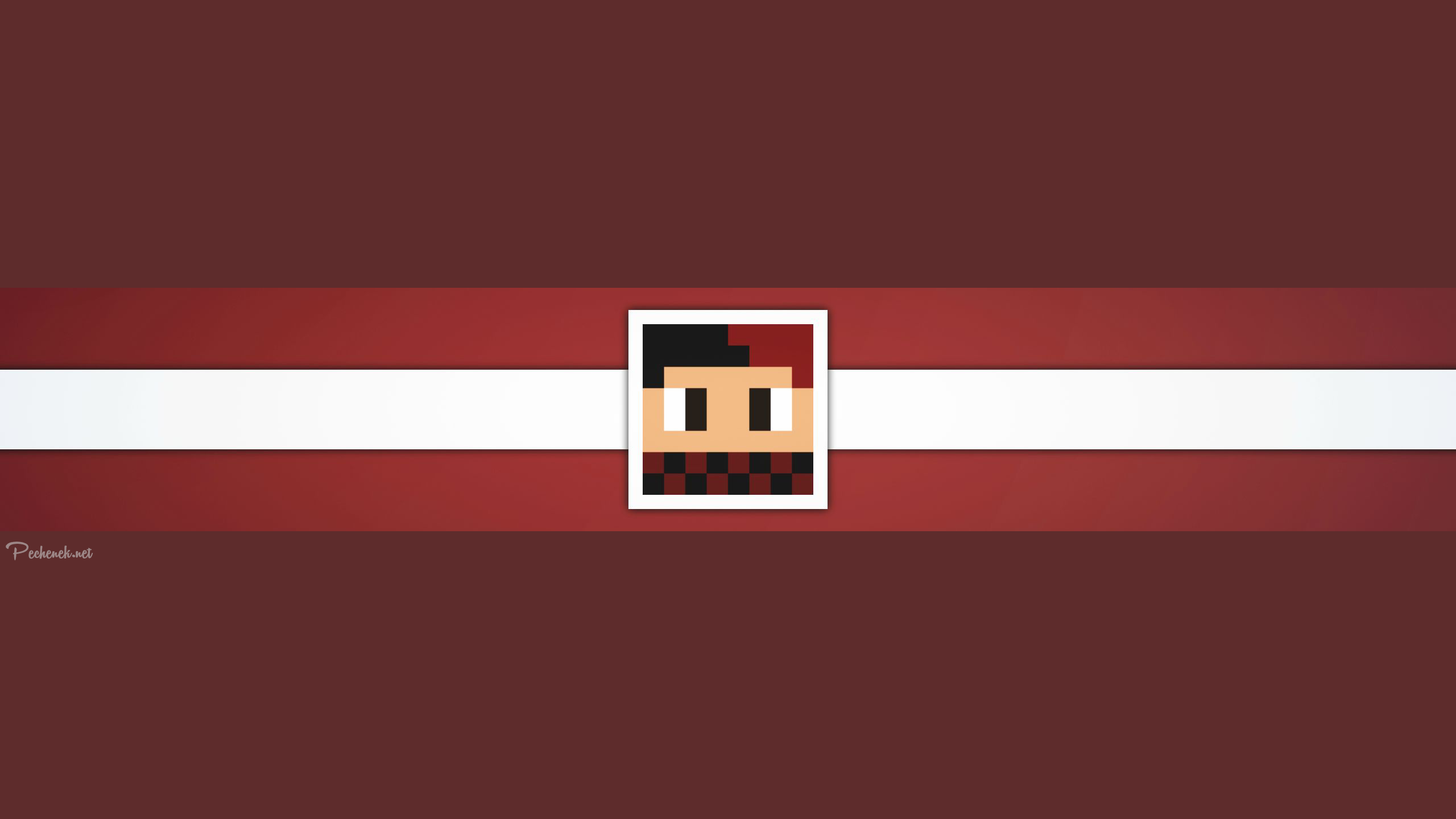
<style>
.page{position:relative;width:1456px;height:819px;background:#5e2c2c}
.page>*{position:absolute;margin:0}
.t1{font:26.1px "Vantom";color:#9d8787}
</style>
<div class="page">
<p class="t1" style="left:5px;top:541px;width:88px;height:20px">Pechenek.net</p>
</div>
